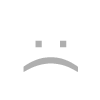
<style>
.page{position:relative;width:100px;height:100px;background:#ffffff}
.page>*{position:absolute;margin:0}
.t1{font:57.6px "ArialMT";letter-spacing:0.02em;color:#afafaf;font-weight:bold;scale:0.93 1}
</style>
<div class="page">
<p class="t1" style="left:23px;top:40px;width:55px;height:32px;rotate:90deg">:(</p>
</div>
